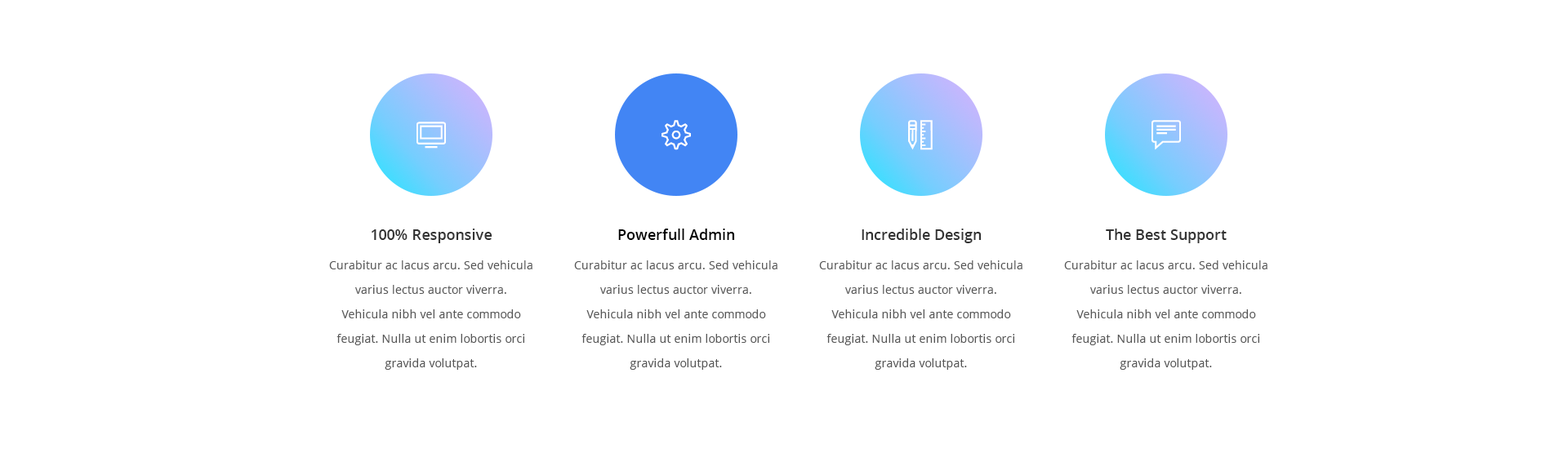
<style>
.page{position:relative;width:1568px;height:453px;background:#ffffff}
.page>*{position:absolute;margin:0}
.t1{font:14.7px "OpenSans-Semibold";color:#333333}
.t2{font:14.7px "OpenSans-Semibold";color:#000000}
.t3{font:11.4px/24.5px "OpenSans";color:#575757}
</style>
<div class="page">
<p class="t1" style="left:372px;top:229px;width:120px;height:14px">100% Responsive</p>
<p class="t2" style="left:618px;top:229px;width:117px;height:11px">Powerfull Admin</p>
<p class="t1" style="left:862px;top:229px;width:120px;height:14px">Incredible Design</p>
<p class="t1" style="left:1106px;top:229px;width:121px;height:14px">The Best Support</p>
<p class="t3" style="left:329px;top:261px;width:203px;height:109px;text-align:center">Curabitur ac lacus arcu. Sed vehicula varius lectus auctor viverra.<br>Vehicula nibh vel ante commodo feugiat. Nulla ut enim lobortis orci gravida volutpat.</p>
<p class="t3" style="left:574px;top:261px;width:203px;height:109px;text-align:center">Curabitur ac lacus arcu. Sed vehicula varius lectus auctor viverra.<br>Vehicula nibh vel ante commodo feugiat. Nulla ut enim lobortis orci gravida volutpat.</p>
<p class="t3" style="left:819px;top:261px;width:203px;height:109px;text-align:center">Curabitur ac lacus arcu. Sed vehicula varius lectus auctor viverra.<br>Vehicula nibh vel ante commodo feugiat. Nulla ut enim lobortis orci gravida volutpat.</p>
<p class="t3" style="left:1064px;top:261px;width:203px;height:109px;text-align:center">Curabitur ac lacus arcu. Sed vehicula varius lectus auctor viverra.<br>Vehicula nibh vel ante commodo feugiat. Nulla ut enim lobortis orci gravida volutpat.</p>
</div>
